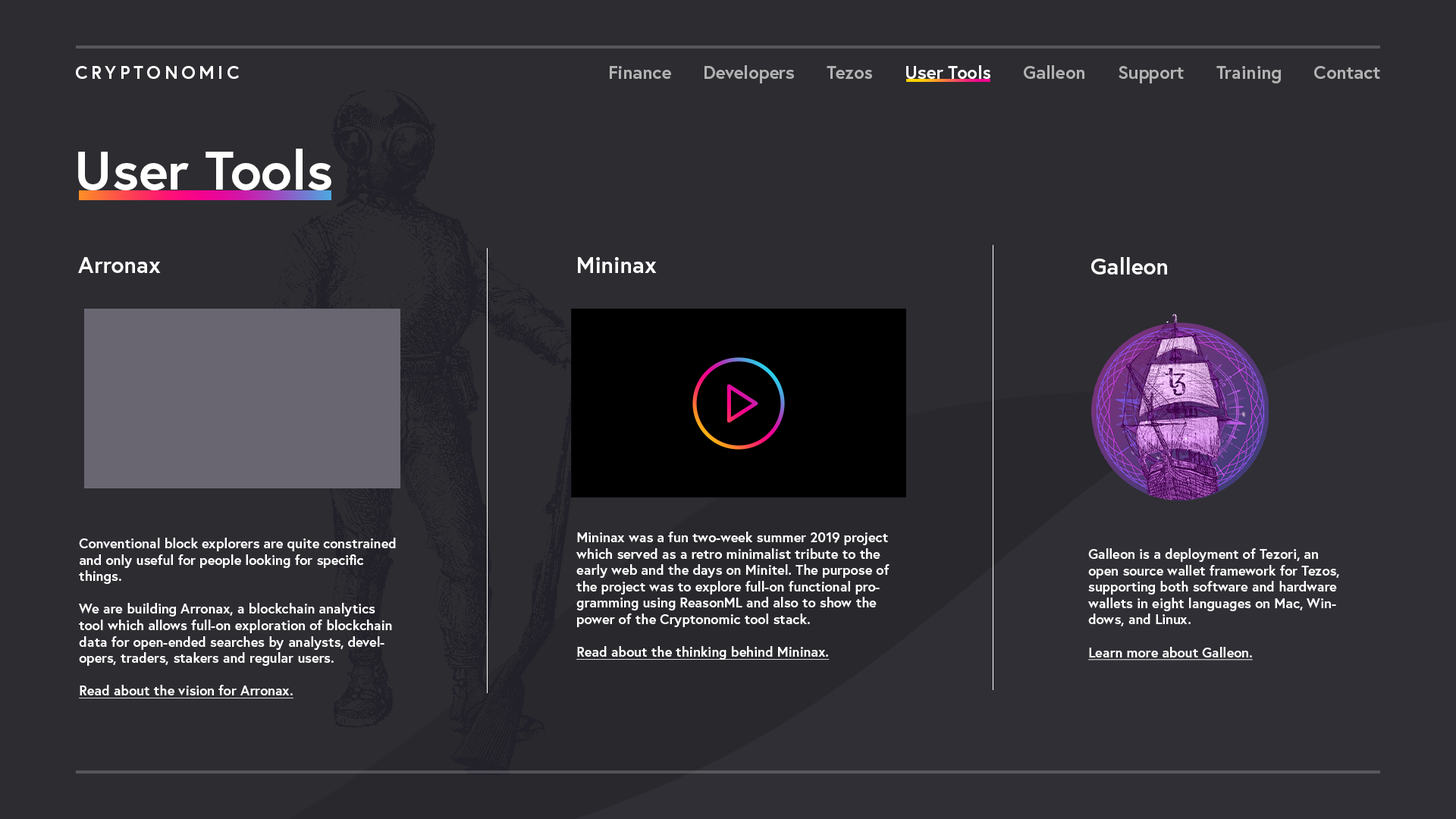
<style>
.page{position:relative;width:1456px;height:819px;background:#2d2c31}
.page>*{position:absolute;margin:0}
.t1{font:18.2px "Europa-Bold";letter-spacing:0.2em;color:#ffffff;text-transform:uppercase}
.t2{font:18.2px "Europa-Bold";color:#b2b2b2}
.t3{font:18.2px "Europa-Bold";color:#ffffff}
.t4{font:54.6px "Europa-Bold";color:#ffffff}
.t5{font:22.7px "Europa-Bold";color:#ffffff}
.t6{font:13.6px "Europa-Bold";color:#ffffff}
.t7{font:13.6px "Europa-Bold";color:#ffffff;text-decoration:underline}
</style>
<div class="page">
<p class="t1" style="left:76px;top:66px;width:163px;height:13px">CryptoNOMIC</p>
<p class="t2" style="left:610px;top:65px;width:770px;height:18px">Finance      Developers      Tezos      <span class="t3">User Tools</span>      Galleon      Support      Training      Contact</p>
<p class="t4" style="left:78px;top:149px;width:253px;height:41px">User Tools</p>
<p class="t5" style="left:78px;top:257px;width:83px;height:16px">Arronax</p>
<p class="t5" style="left:578px;top:257px;width:79px;height:16px">Mininax</p>
<p class="t5" style="left:1091px;top:257px;width:76px;height:18px">Galleon</p>
<p class="t6" style="left:576px;top:532px;width:314px;height:128px">Mininax was a fun two-week summer 2019 project which served as a retro minimalist tribute to the early web and the days on Minitel. The purpose of the project was to explore full-on functional programming using ReasonML and also to show the power of the Cryptonomic tool stack. <br><br><span class="t7">Read about the thinking behind Mininax.</span></p>
<p class="t6" style="left:79px;top:538px;width:317px;height:160px">Conventional block explorers are quite constrained and only useful for people looking for specific things. <br><br>We are building Arronax, a blockchain analytics tool which allows full-on exploration of blockchain data for open-ended searches by analysts, developers, traders, stakers and regular users. <br><br><span class="t7">Read about the vision for Arronax.</span></p>
<p class="t6" style="left:1088px;top:548px;width:251px;height:112px">Galleon is a deployment of Tezori, an open source wallet framework for Tezos, supporting both software and hardware wallets in eight languages on Mac, Windows, and Linux.<br><br><span class="t7">Learn more about Galleon.</span></p>
</div>
